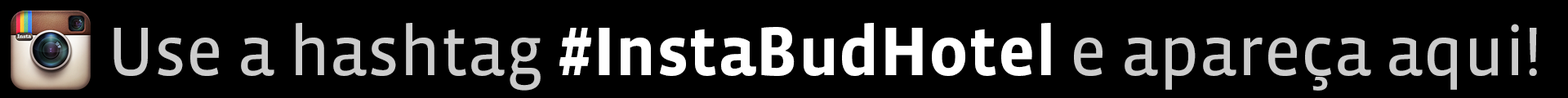
<style>
.page{position:relative;width:1568px;height:98px;background:#000000}
.page>*{position:absolute;margin:0}
.t1{font:70.2px "VistaSansOT-Reg";color:#cccccc}
.t2{font:70.2px "VistaSansOT-Bold";color:#ffffff}
</style>
<div class="page">
<p class="t1" style="left:114px;top:23px;width:1423px;height:68px">Use a hashtag <span class="t2">#InstaBudHotel </span>e apareça aqui!</p>
</div>
